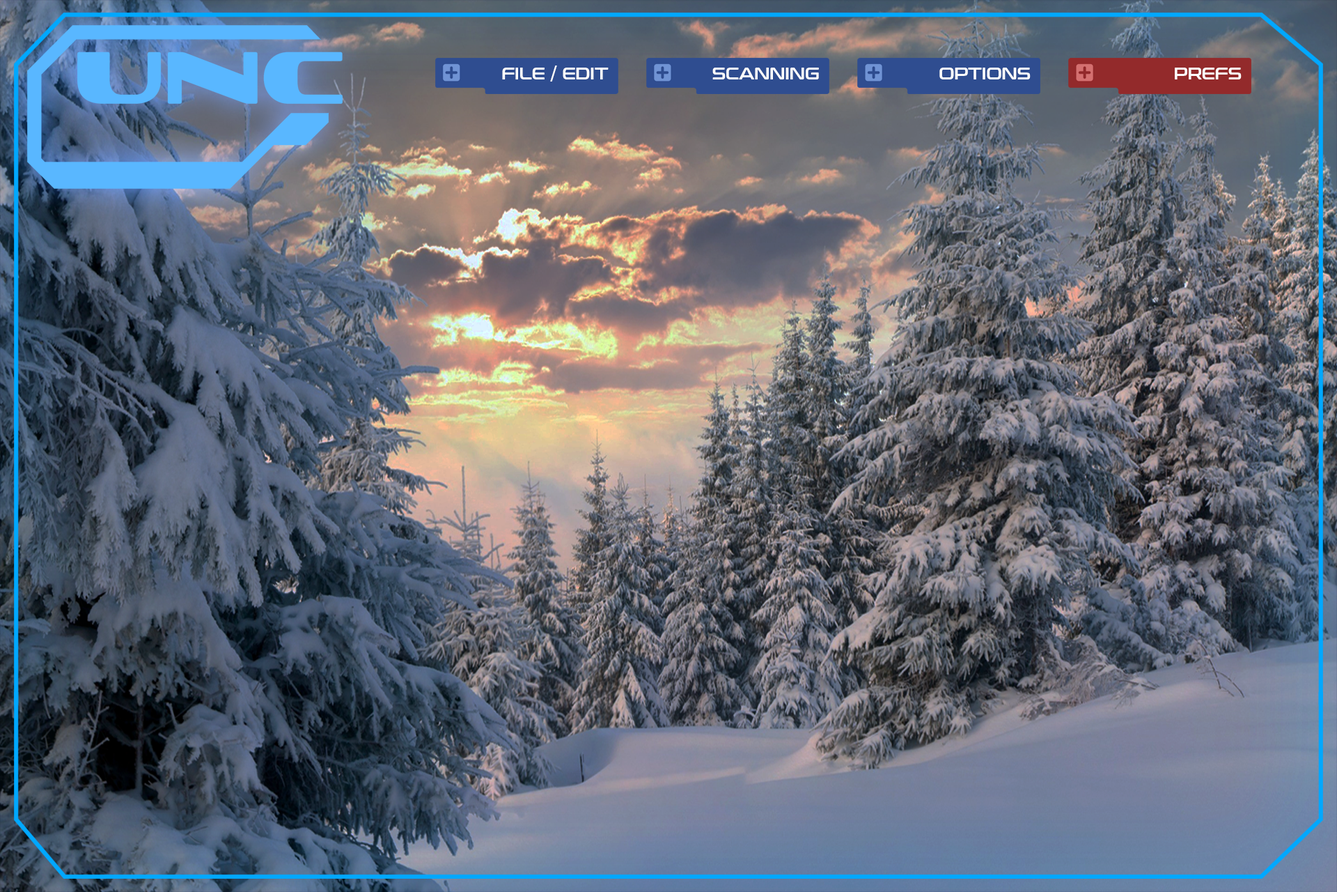
<style>
.page{position:relative;width:1337px;height:892px}
.page>*{position:absolute;margin:0}
.t1{font:15.8px "ConthraxSb-Regular";color:#fffffe}
</style>
<div class="page">
<p class="t1" style="left:502px;top:65px;width:107px;height:16px">FILE / EDIT</p>
<p class="t1" style="left:713px;top:68px;width:106px;height:11px">SCANNING</p>
<p class="t1" style="left:940px;top:68px;width:91px;height:11px">OPTIONS</p>
<p class="t1" style="left:1175px;top:68px;width:67px;height:11px">PREFS</p>
</div>
